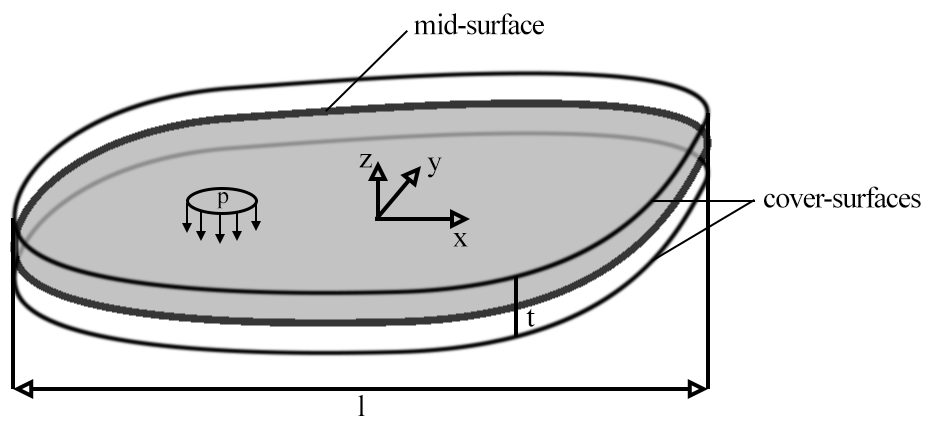
<style>
.page{position:relative;width:930px;height:425px;background:#ffffff}
.page>*{position:absolute;margin:0}
.t1{font:30px "TimesNewRomanPSMT";letter-spacing:-0.04em;color:#000000}
.t2{font:24px "TimesNewRomanPSMT";letter-spacing:-0.04em;color:#000000}
.t3{font:30px "TimesNewRomanPSMT";color:#000000}
</style>
<div class="page">
<p class="t1" style="left:414px;top:13px;width:130px;height:22px">mid-surface</p>
<p class="t1" style="left:359px;top:154px;width:13px;height:14px">z</p>
<p class="t1" style="left:427px;top:157px;width:15px;height:21px">y</p>
<p class="t2" style="left:216px;top:192px;width:13px;height:17px">p</p>
<p class="t1" style="left:764px;top:186px;width:157px;height:22px">cover-surfaces</p>
<p class="t1" style="left:453px;top:233px;width:15px;height:14px">x</p>
<p class="t3" style="left:526px;top:308px;width:9px;height:19px">t</p>
<p class="t3" style="left:358px;top:395px;width:7px;height:21px">l</p>
</div>
